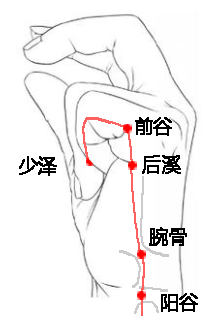
<style>
.page{position:relative;width:212px;height:317px;background:#ffffff}
.page>*{position:absolute;margin:0}
.t1{font:18.7px "MicrosoftYaHei";color:#000000;font-weight:bold}
</style>
<div class="page">
<p class="t1" style="left:135px;top:117px;width:37px;height:19px">前谷</p>
<p class="t1" style="left:19px;top:156px;width:38px;height:20px">少泽</p>
<p class="t1" style="left:142px;top:155px;width:39px;height:19px">后溪</p>
<p class="t1" style="left:149px;top:227px;width:38px;height:19px">腕骨</p>
<p class="t1" style="left:161px;top:293px;width:37px;height:19px">阳谷</p>
</div>
